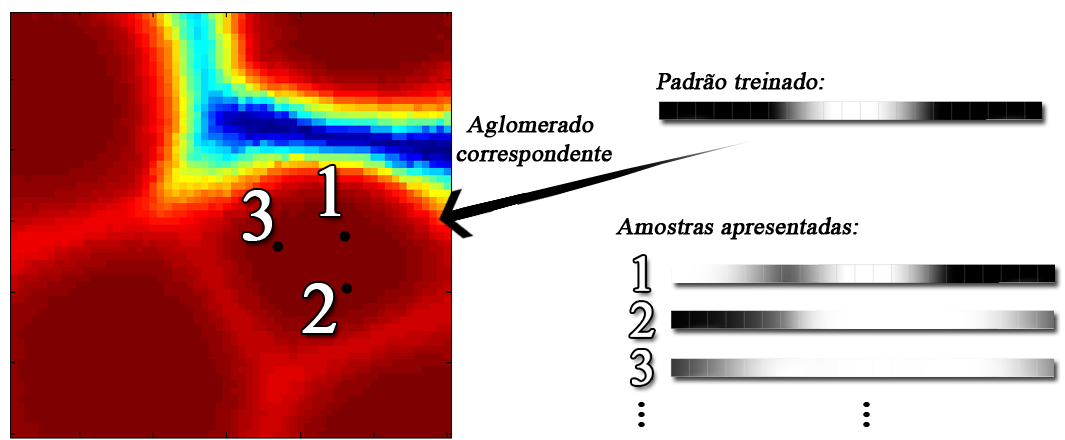
<style>
.page{position:relative;width:1065px;height:440px;background:#ffffff}
.page>*{position:absolute;margin:0}
.t1{font:24px "TimesNewRomanPSMT";color:#000000;font-weight:bold;font-style:italic}
.t2{font:72px "TimesNewRomanPSMT";color:#ffffff;font-weight:bold}
.t3{font:60px/10px "TimesNewRomanPSMT";color:#000000}
</style>
<div class="page">
<p class="t1" style="left:656px;top:72px;width:169px;height:18px">Padrão treinado:</p>
<p class="t1" style="left:456px;top:115px;width:156px;height:52px;text-align:center">Aglomerado <br>correspondente</p>
<p class="t2" style="left:319px;top:166px;width:22px;height:50px">1</p>
<p class="t1" style="left:615px;top:217px;width:244px;height:23px">Amostras apresentadas:</p>
<p class="t2" style="left:302px;top:283px;width:34px;height:50px">2</p>
<p class="t3" style="left:638px;top:402px;width:7px;height:25px;text-align:center">.<br>.<br>.</p>
<p class="t3" style="left:863px;top:402px;width:7px;height:25px;text-align:center">.<br>.<br>.</p>
</div>
